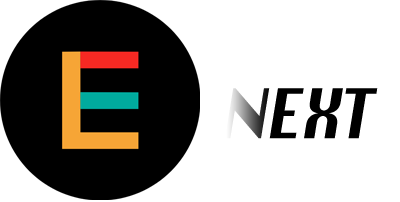
<style>
.page{position:relative;width:400px;height:202px;background:#ffffff}
.page>*{position:absolute;margin:0}
.t1{font:66.7px "Krungthep";letter-spacing:-0.03em;color:#010000;font-style:italic;scale:0.93 1}
</style>
<div class="page">
<p class="t1" style="left:225px;top:88px;width:153px;height:51px">NEXT</p>
</div>
